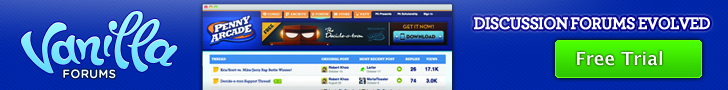
<style>
.page{position:relative;width:728px;height:90px}
.page>*{position:absolute;margin:0}
.t1{font:18px "Archer-BoldLF";letter-spacing:-0.075em;color:#ffffff;font-weight:bold;scale:0.95 1}
.t2{font:18px "LucidaGrande-Bold";color:#ffffff}
.t3{font:12px "GothamRounded-Bold";color:#f5ffff}
</style>
<div class="page">
<p class="t1" style="left:474px;top:17px;width:236px;height:13px">DISCUSSION FORUMS EVOLVED</p>
<p class="t2" style="left:577px;top:51px;width:85px;height:15px">Free Trial</p>
<p class="t3" style="left:63px;top:69px;width:53px;height:10px">FORUMS</p>
</div>
